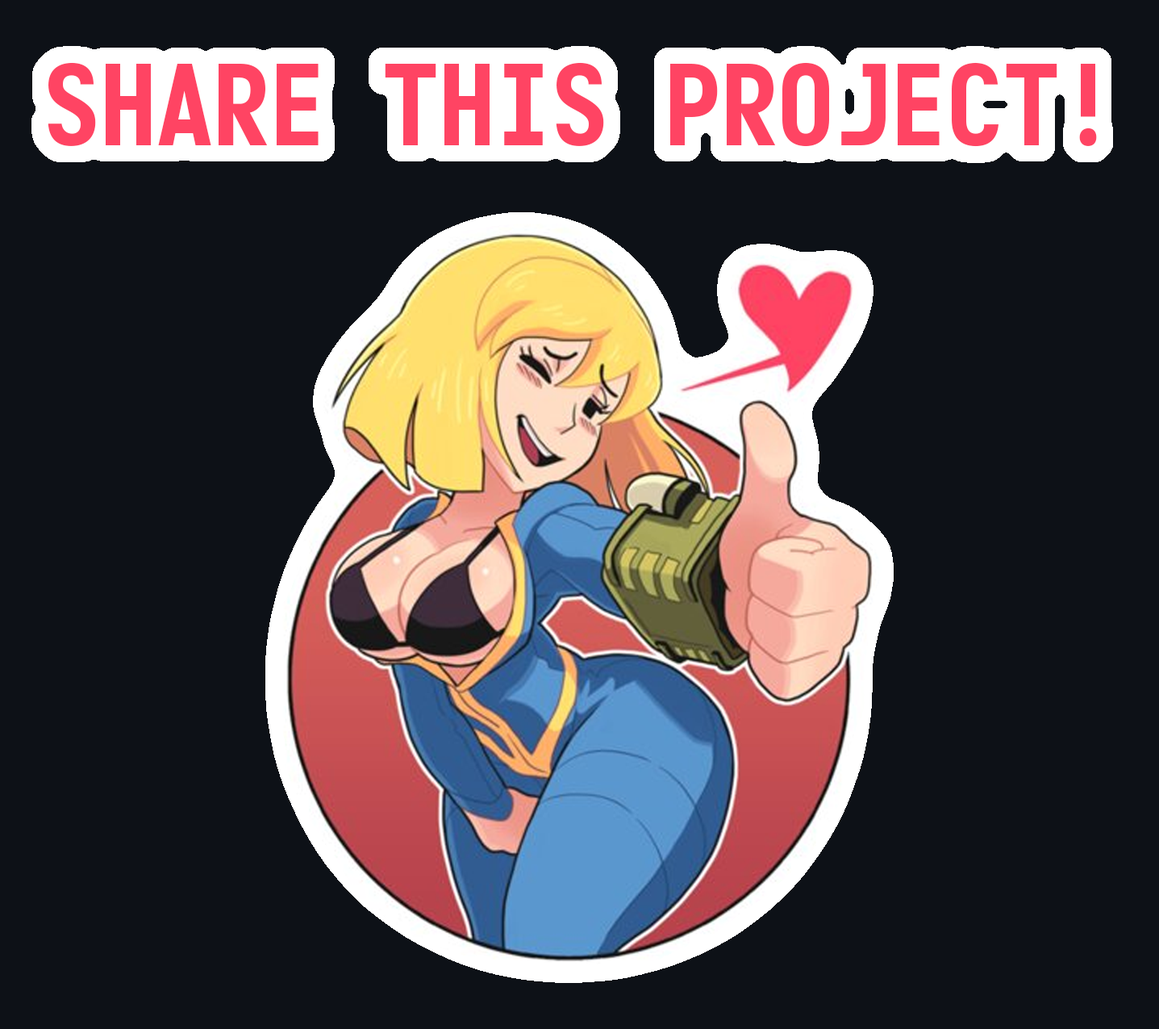
<style>
.page{position:relative;width:1159px;height:1029px;background:#0d1117}
.page>*{position:absolute;margin:0}
.t1{font:112.9px "Monofonto-Regular";color:#ff4463}
</style>
<div class="page">
<p class="t1" style="left:48px;top:62px;width:1049px;height:85px">SHARE THIS PROJECT!</p>
</div>
